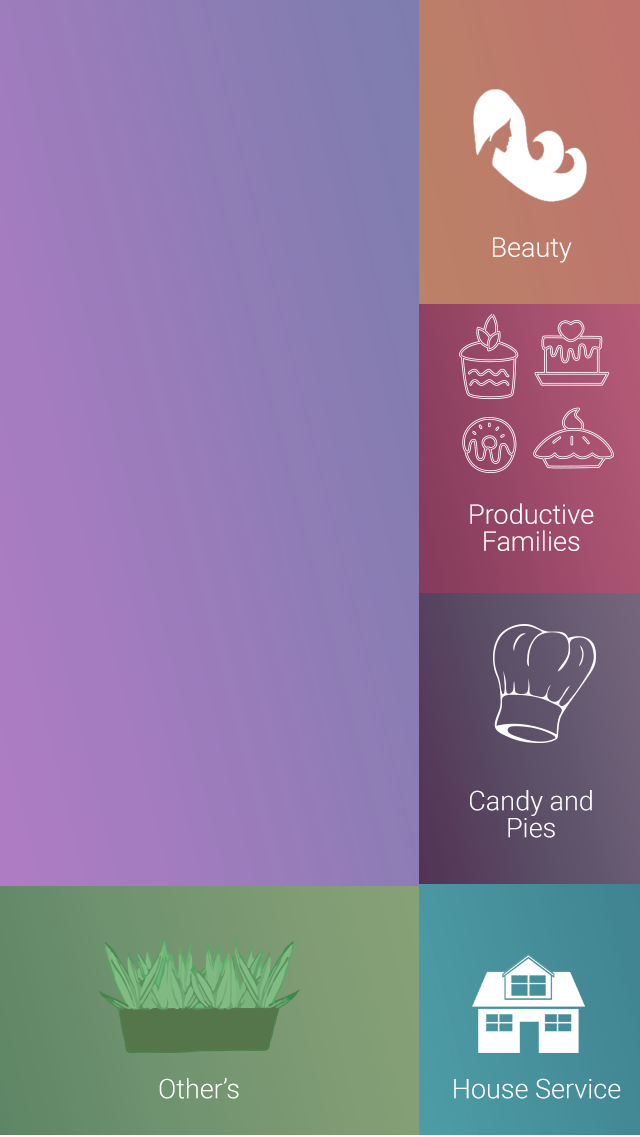
<style>
.page{position:relative;width:640px;height:1137px}
.page>*{position:absolute;margin:0}
.t1{font:27px "Roboto-Light";color:#ffffff}
.t2{font:27px/27px "Roboto-Light";color:#ffffff}
</style>
<div class="page">
<p class="t1" style="left:493px;top:237px;width:79px;height:26px">Beauty</p>
<p class="t2" style="left:470px;top:503px;width:124px;height:48px;text-align:center">Productive<br>Families</p>
<p class="t2" style="left:470px;top:790px;width:122px;height:48px;text-align:center">Candy and<br>Pies</p>
<p class="t1" style="left:159px;top:1078px;width:80px;height:21px">Other’s</p>
<p class="t1" style="left:454px;top:1078px;width:167px;height:21px">House Service</p>
</div>
